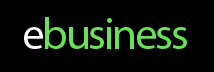
<style>
.page{position:relative;width:214px;height:72px;background:#000000}
.page>*{position:absolute;margin:0}
.t1{font:45px "MyriadPro-Regular";letter-spacing:-0.05em;color:#6be059}
.t2{font:45px "MyriadPro-Regular";letter-spacing:-0.05em;color:#ffffff}
</style>
<div class="page">
<p class="t1" style="left:24px;top:17px;width:163px;height:32px"><span class="t2">e</span>business</p>
</div>
